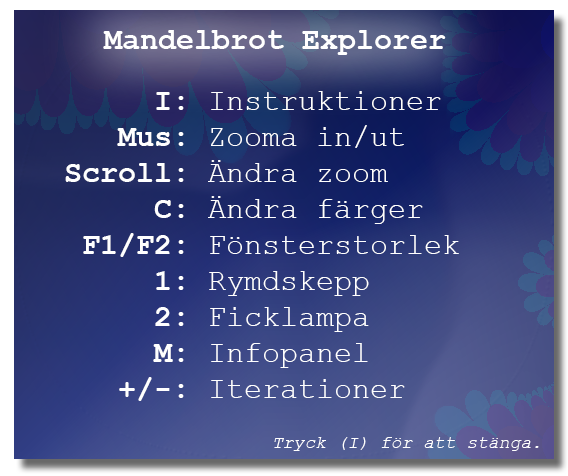
<style>
.page{position:relative;width:568px;height:476px}
.page>*{position:absolute;margin:0}
.t1{font:30px "CourierNewPS-BoldMT";color:#ffffff}
.t2{font:30px "CourierNewPSMT";color:#ffffff}
.t3{font:18px "CourierNewPS-ItalicMT";color:#ffffff}
</style>
<div class="page">
<p class="t1" style="left:103px;top:30px;width:343px;height:25px">Mandelbrot Explorer</p>
<p class="t2" style="left:65px;top:91px;width:394px;height:310px"><span class="t1">I:</span> Instruktioner<br><span class="t1">    Mus:</span> Zooma in/ut<br><span class="t1">  Scroll:</span> Ändra zoom<br><span class="t1">        C:</span> Ändra färger<br><span class="t1">     F1/F2:</span> Fönsterstorlek<br><span class="t1">        1:</span> Rymdskepp<br><span class="t1">        2:</span> Ficklampa<br><span class="t1">        M:</span> Infopanel<br>     <span class="t1">+/-:</span> Iterationer</p>
<p class="t3" style="left:274px;top:437px;width:265px;height:14px">Tryck (I) för att stänga.</p>
</div>
